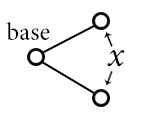
<style>
.page{position:relative;width:146px;height:116px;background:#ffffff}
.page>*{position:absolute;margin:0}
.t1{font:25px "MinionPro-Regular";color:#000000}
.t2{font:35px "MinionPro-It";color:#000000}
</style>
<div class="page">
<p class="t1" style="left:6px;top:22px;width:44px;height:18px">base</p>
<p class="t2" style="left:107px;top:50px;width:18px;height:17px">x</p>
</div>
